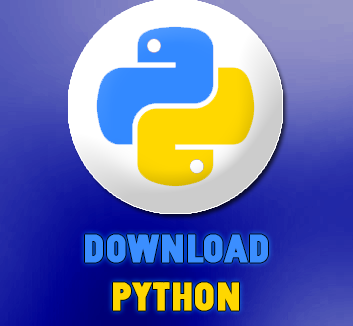
<style>
.page{position:relative;width:353px;height:326px}
.page>*{position:absolute;margin:0}
.t1{font:40px "ZilapSleep-Grunge";color:#3b8eff;font-weight:bold}
.t2{font:40px "ZilapSleep-Grunge";color:#fed700;font-weight:bold}
</style>
<div class="page">
<p class="t1" style="left:85px;top:234px;width:183px;height:77px;text-align:center">Download<br><span class="t2">Python</span></p>
</div>
